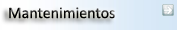
<style>
.page{position:relative;width:177px;height:30px}
.page>*{position:absolute;margin:0}
.t1{font:16px "Calibri";color:#000000}
</style>
<div class="page">
<p class="t1" style="left:9px;top:7px;width:106px;height:12px">Mantenimientos</p>
</div>
